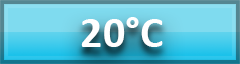
<style>
.page{position:relative;width:240px;height:64px}
.page>*{position:absolute;margin:0}
.t1{font:44.4px "Calibri-Bold";color:#ffffff}
</style>
<div class="page">
<p class="t1" style="left:81px;top:17px;width:82px;height:30px">20°C</p>
</div>
